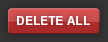
<style>
.page{position:relative;width:108px;height:42px}
.page>*{position:absolute;margin:0}
.t1{font:12px "Helvetica-Bold";color:#ffffff;text-transform:uppercase}
</style>
<div class="page">
<p class="t1" style="left:17px;top:16px;width:73px;height:9px">DELETE ALL</p>
</div>
